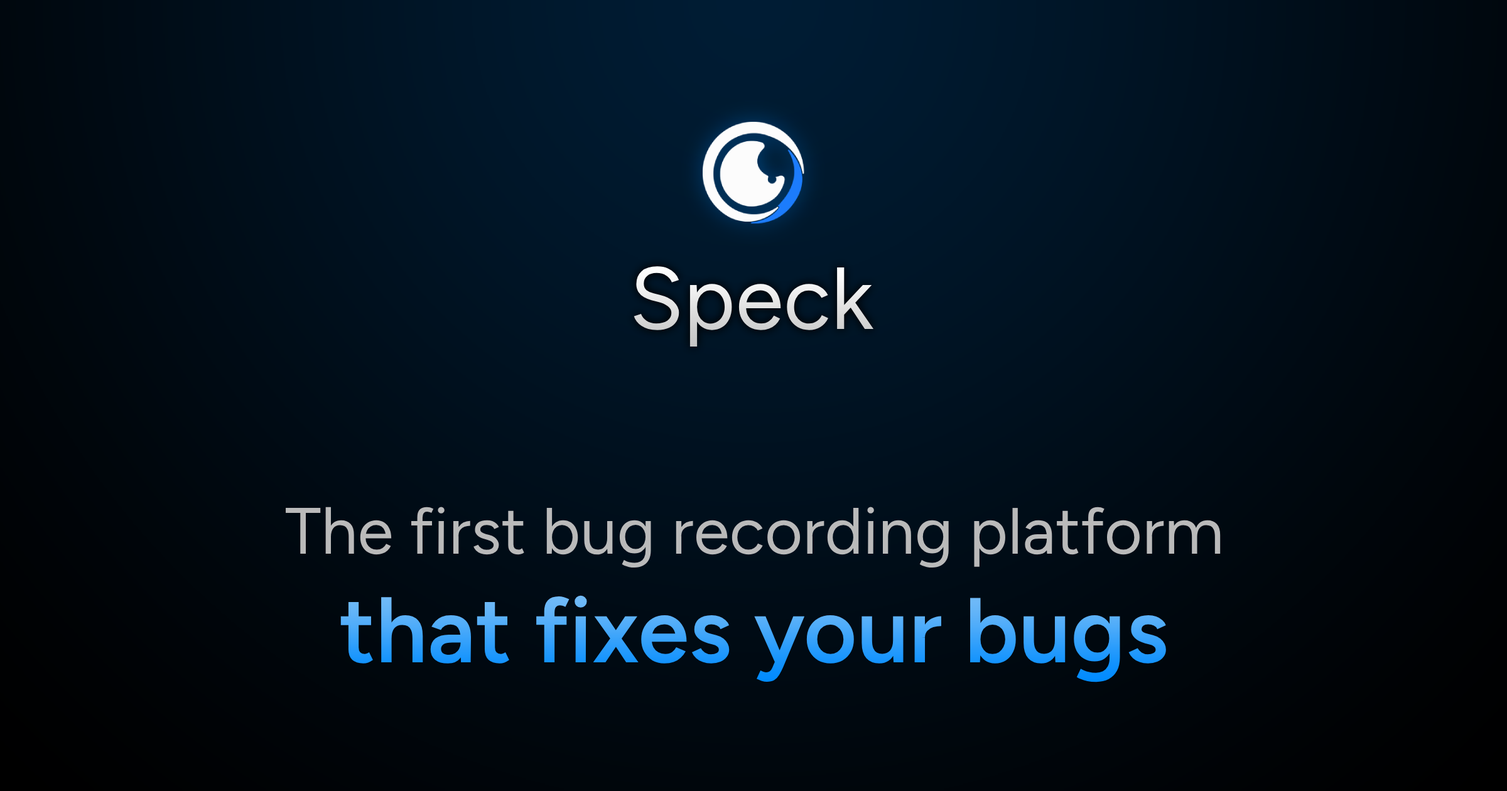
<style>
.page{position:relative;width:1507px;height:791px}
.page>*{position:absolute;margin:0}
.t1{font:87.9px "Figtree-Regular";color:#e4e4e4}
.t2{font:65.4px "Figtree-Regular";color:#bababa}
.t3{font:92px "Figtree-SemiBold"}
</style>
<div class="page">
<p class="t1" style="left:634px;top:266px;width:240px;height:81px">Speck</p>
<p class="t2" style="left:286px;top:507px;width:935px;height:61px">The first bug recording platform</p>
<p class="t3" style="left:340px;top:595px;width:826px;height:88px">that fixes your bugs</p>
</div>
